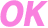
<style>
.page{position:relative;width:48px;height:28px;background:#ffffff}
.page>*{position:absolute;margin:0}
.t1{font:32px "RodinPro-EB";letter-spacing:-0.046em;color:#f980de;font-style:italic}
</style>
<div class="page">
<p class="t1" style="left:0px;top:0px;width:48px;height:27px">OK</p>
</div>
